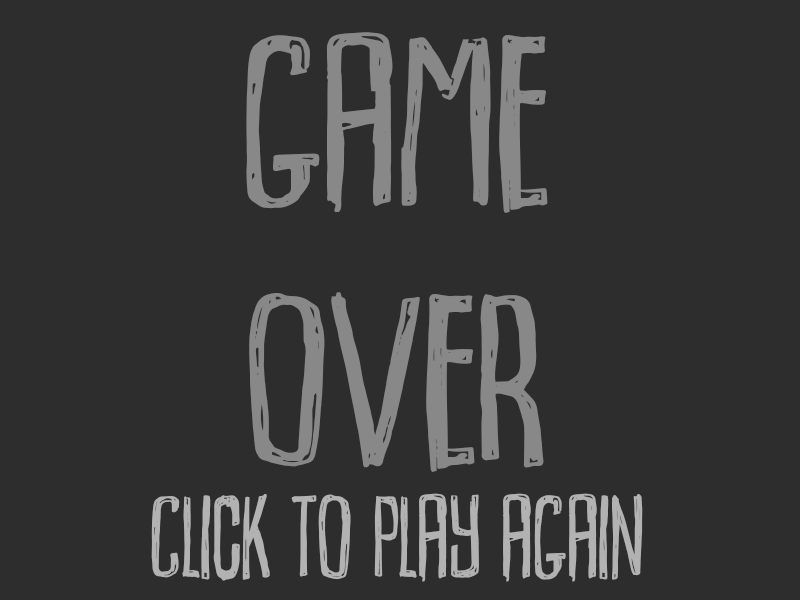
<style>
.page{position:relative;width:800px;height:600px;background:#2d2d2d}
.page>*{position:absolute;margin:0}
.t1{font:216.1px "DummkopfDEMO-Regular";color:#888888;scale:1.16 1}
.t2{font:105.4px "DummkopfDEMO-Regular";color:#b2b2b2}
</style>
<div class="page">
<p class="t1" style="left:246px;top:32px;width:302px;height:440px;text-align:center">GAME<br>OVER</p>
<p class="t2" style="left:151px;top:493px;width:492px;height:89px">cLICK TO PLAY AGAIN</p>
</div>
